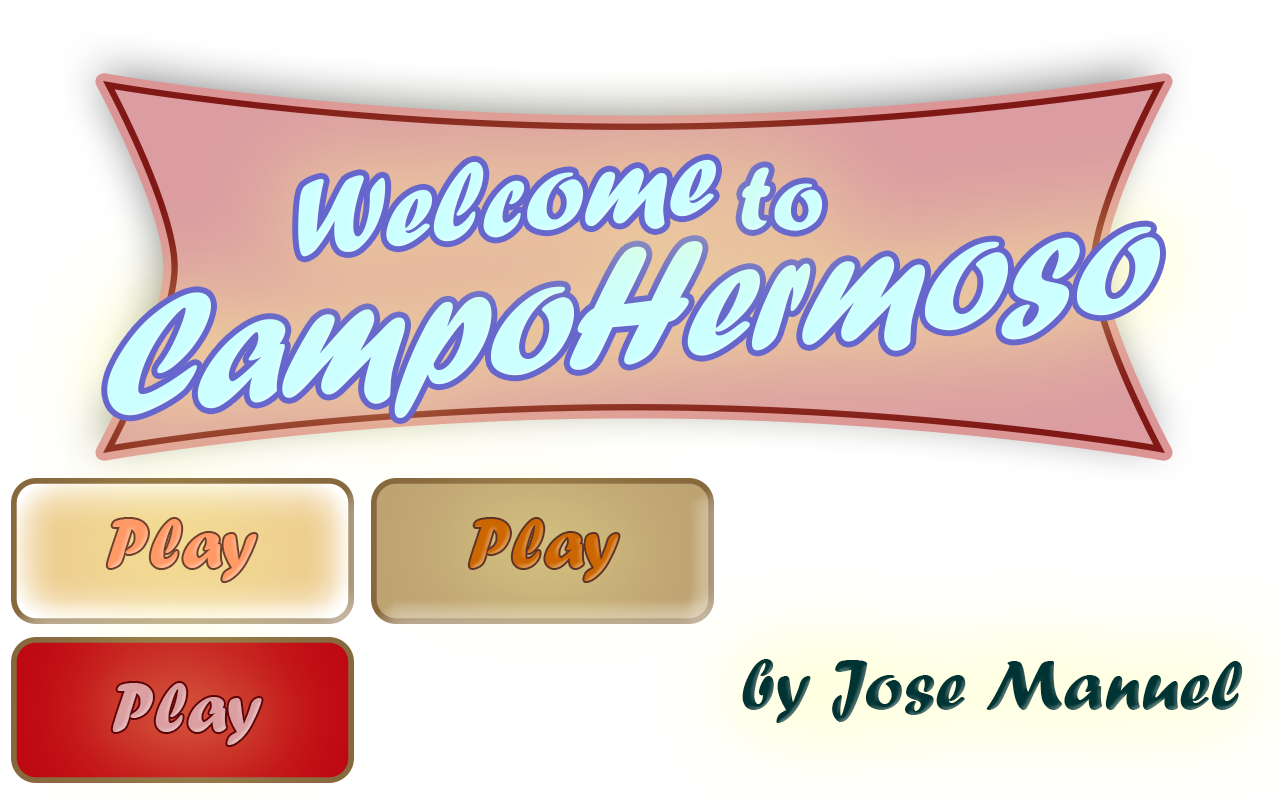
<style>
.page{position:relative;width:1280px;height:800px;background:#ffffff}
.page>*{position:absolute;margin:0}
.t1{font:114.3px "ForteMT";color:#ccffff}
.t2{font:95.8px "ForteMT";color:#ccffff}
.t3{font:180.3px "ForteMT";color:#ccffff;scale:0.86 1}
.t4{font:72px "ForteMT";color:#ff9966}
.t5{font:72px "ForteMT";color:#cc6600}
.t6{font:72px "ForteMT";color:#003333}
.t7{font:72px "ForteMT";color:#db9ea1}
</style>
<div class="page">
<p class="t1" style="left:298px;top:159px;width:418px;height:98px;rotate:-6deg">Welcome</p>
<p class="t2" style="left:741px;top:167px;width:81px;height:64px;rotate:-1deg">to</p>
<p class="t3" style="left:107px;top:226px;width:1053px;height:192px;rotate:-6deg">CampoHermoso</p>
<p class="t4" style="left:107px;top:519px;width:150px;height:62px">Play</p>
<p class="t5" style="left:469px;top:519px;width:150px;height:62px">Play</p>
<p class="t6" style="left:742px;top:659px;width:501px;height:64px">by Jose Manuel</p>
<p class="t7" style="left:112px;top:683px;width:150px;height:62px">Play</p>
</div>
